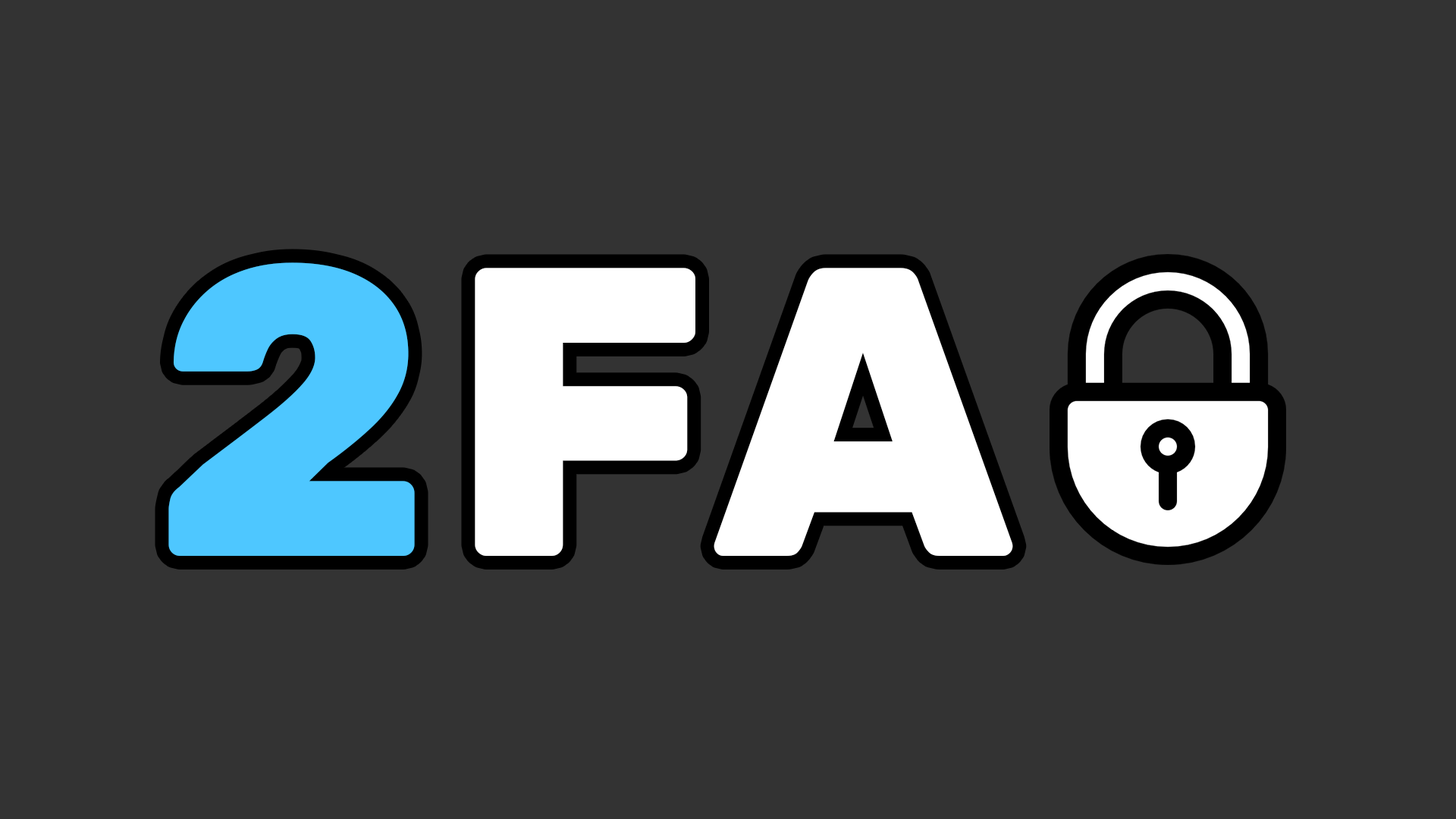
<style>
.page{position:relative;width:1456px;height:819px;background:#333333}
.page>*{position:absolute;margin:0}
.t1{font:409px "Rubik-ExtraBold";letter-spacing:0.02em;color:#4ec7ff;font-weight:bold}
.t2{font:409px "Rubik-ExtraBold";letter-spacing:0.02em;color:#ffffff;font-weight:bold}
</style>
<div class="page">
<p class="t1" style="left:168px;top:262px;width:247px;height:294px">2</p>
<p class="t2" style="left:475px;top:268px;width:538px;height:288px">FA</p>
</div>
